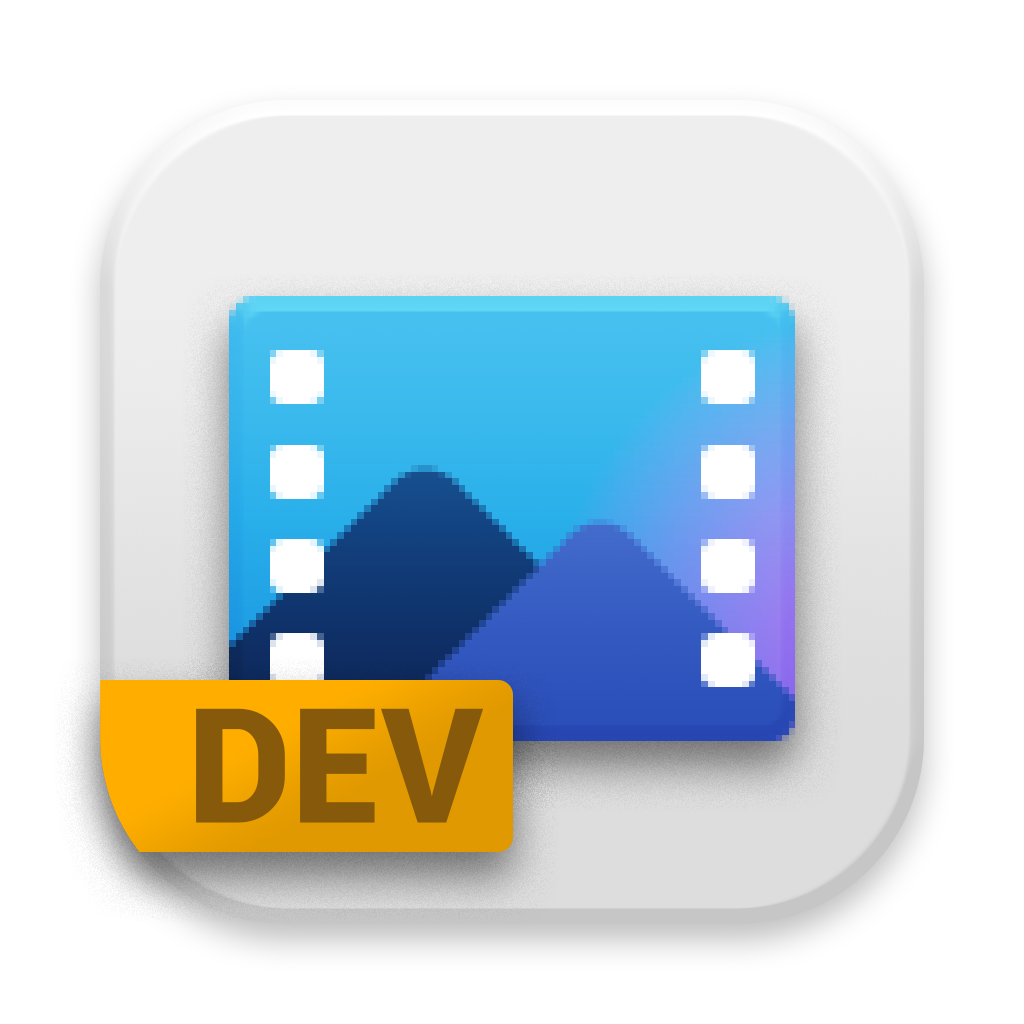
<style>
.page{position:relative;width:1024px;height:1024px;background:#ffffff}
.page>*{position:absolute;margin:0}
.t1{font:160px "Roboto-Black";color:#87590a;text-transform:uppercase}
</style>
<div class="page">
<p class="t1" style="left:196px;top:708px;width:287px;height:115px">Dev</p>
</div>
